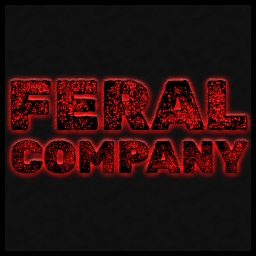
<style>
.page{position:relative;width:256px;height:256px;background:#111111}
.page>*{position:absolute;margin:0}
.t1{font:70.8px "RubikDirt-Regular";color:#000000}
.t2{font:45.8px "RubikDirt-Regular";color:#000000}
</style>
<div class="page">
<p class="t1" style="left:10px;top:79px;width:238px;height:52px">FERAL</p>
<p class="t2" style="left:11px;top:140px;width:237px;height:34px">COMPANY</p>
</div>
